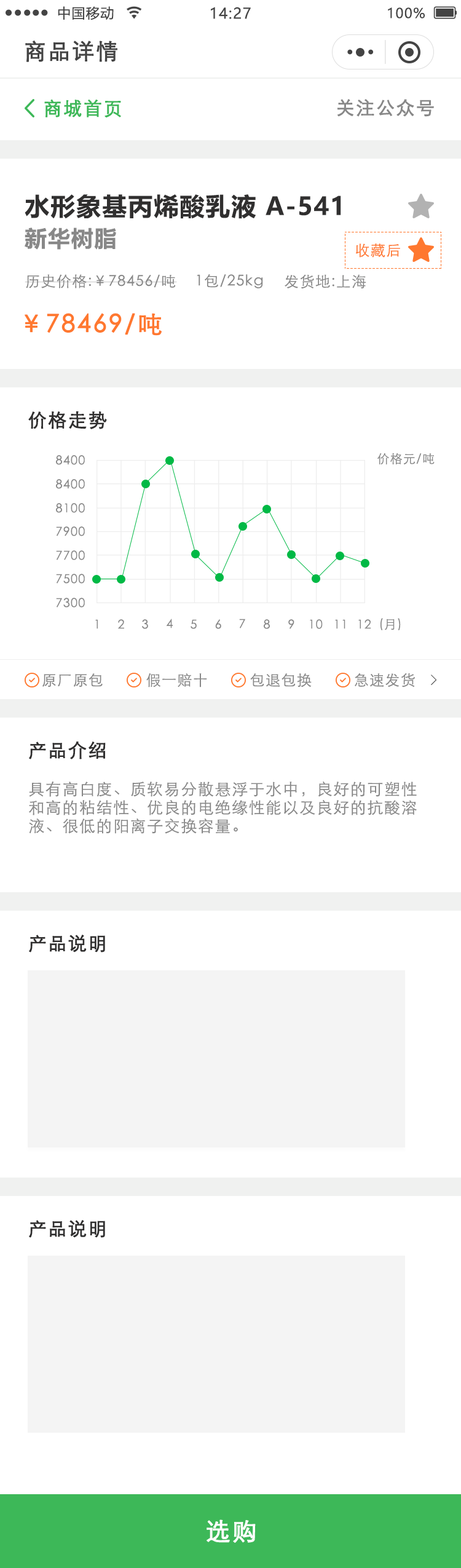
<style>
.page{position:relative;width:461px;height:1568px;background:#ffffff}
.page>*{position:absolute;margin:0}
.t1{font:13.5px "MicrosoftYaHei";letter-spacing:0.06em;color:#444444}
.t2{font:14.8px "MicrosoftYaHei";letter-spacing:0.06em;color:#444444}
.t3{font:22.1px "STXihei";letter-spacing:0.06em;color:#444444;font-weight:bold}
.t4{font:18.4px "STXihei";letter-spacing:0.06em;color:#3db858;font-weight:bold}
.t5{font:18.4px "STXihei";letter-spacing:0.06em;color:#888888;font-weight:bold}
.t6{font:24.6px "MicrosoftYaHei-Bold";letter-spacing:0.05em;color:#302f2f}
.t7{font:22.1px "MicrosoftYaHei-Bold";letter-spacing:0.05em;color:#888888}
.t8{font:14.8px "STXihei";letter-spacing:0.06em;color:#ff782f}
.t9{font:14.8px "STXihei";letter-spacing:0.06em;color:#888888}
.t10{font:24.6px "STXihei";letter-spacing:0.06em;color:#ff782f;font-weight:bold}
.t11{font:18.4px "STXihei";letter-spacing:0.06em;color:#302f2f;font-weight:bold}
.t12{font:12.3px "STXihei";letter-spacing:0.06em;color:#888888}
.t13{font:14.8px "SimSun";letter-spacing:0.06em;color:#444444}
.t14{font:16px/18.4px "STXihei";letter-spacing:0.06em;color:#888888}
.t15{font:24.6px "STXihei";letter-spacing:0.06em;color:#ffffff;font-weight:bold}
</style>
<div class="page">
<p class="t1" style="left:58px;top:6px;width:56px;height:14px">中国移动</p>
<p class="t2" style="left:211px;top:7px;width:40px;height:12px">14:27</p>
<p class="t1" style="left:388px;top:7px;width:37px;height:11px">100%</p>
<p class="t3" style="left:25px;top:40px;width:92px;height:22px">商品详情</p>
<p class="t4" style="left:44px;top:99px;width:77px;height:18px">商城首页</p>
<p class="t5" style="left:338px;top:99px;width:96px;height:18px">关注公众号</p>
<p class="t6" style="left:25px;top:194px;width:316px;height:25px">水形象基丙烯酸乳液 A-541</p>
<p class="t7" style="left:25px;top:228px;width:91px;height:22px">新华树脂</p>
<p class="t8" style="left:355px;top:244px;width:45px;height:14px">收藏后</p>
<p class="t9" style="left:25px;top:274px;width:152px;height:14px">历史价格:￥78456/吨</p>
<p class="t9" style="left:197px;top:274px;width:66px;height:14px">1包/25kg</p>
<p class="t9" style="left:285px;top:274px;width:81px;height:15px">发货地:上海</p>
<p class="t10" style="left:25px;top:313px;width:137px;height:23px">￥78469/吨</p>
<p class="t11" style="left:28px;top:411px;width:79px;height:18px">价格走势</p>
<p class="t12" style="left:56px;top:455px;width:29px;height:10px">8400</p>
<p class="t12" style="left:378px;top:453px;width:57px;height:12px">价格元/吨</p>
<p class="t12" style="left:56px;top:479px;width:29px;height:10px">8400</p>
<p class="t12" style="left:56px;top:503px;width:29px;height:10px">8100</p>
<p class="t12" style="left:56px;top:526px;width:29px;height:10px">7900</p>
<p class="t12" style="left:56px;top:550px;width:29px;height:10px">7700</p>
<p class="t12" style="left:56px;top:574px;width:29px;height:10px">7500</p>
<p class="t12" style="left:56px;top:598px;width:29px;height:10px">7300</p>
<p class="t12" style="left:381px;top:618px;width:20px;height:12px">(月)</p>
<p class="t12" style="left:95px;top:619px;width:3px;height:10px">1</p>
<p class="t12" style="left:118px;top:619px;width:6px;height:10px">2</p>
<p class="t12" style="left:142px;top:619px;width:6px;height:10px">3</p>
<p class="t12" style="left:166px;top:619px;width:7px;height:9px">4</p>
<p class="t12" style="left:191px;top:619px;width:6px;height:10px">5</p>
<p class="t12" style="left:215px;top:619px;width:6px;height:10px">6</p>
<p class="t12" style="left:239px;top:619px;width:6px;height:9px">7</p>
<p class="t12" style="left:264px;top:619px;width:6px;height:10px">8</p>
<p class="t12" style="left:288px;top:619px;width:7px;height:10px">9</p>
<p class="t12" style="left:310px;top:619px;width:13px;height:10px">10</p>
<p class="t12" style="left:335px;top:619px;width:11px;height:10px">11</p>
<p class="t12" style="left:358px;top:619px;width:13px;height:10px">12</p>
<p class="t9" style="left:42px;top:673px;width:61px;height:14px">原厂原包</p>
<p class="t9" style="left:146px;top:673px;width:61px;height:14px">假一赔十</p>
<p class="t9" style="left:250px;top:673px;width:62px;height:14px">包退包换</p>
<p class="t9" style="left:355px;top:673px;width:60px;height:14px">急速发货</p>
<p class="t13" style="left:431px;top:675px;width:6px;height:11px">&gt;</p>
<p class="t11" style="left:29px;top:741px;width:77px;height:18px">产品介绍</p>
<p class="t14" style="left:29px;top:782px;width:388px;height:52px">具有高白度、质软易分散悬浮于水中，良好的可塑性<br>和高的粘结性、优良的电绝缘性能以及良好的抗酸溶<br>液、很低的阳离子交换容量。</p>
<p class="t11" style="left:29px;top:935px;width:76px;height:17px">产品说明</p>
<p class="t11" style="left:29px;top:1220px;width:76px;height:18px">产品说明</p>
<p class="t15" style="left:207px;top:1519px;width:49px;height:24px">选购</p>
</div>
